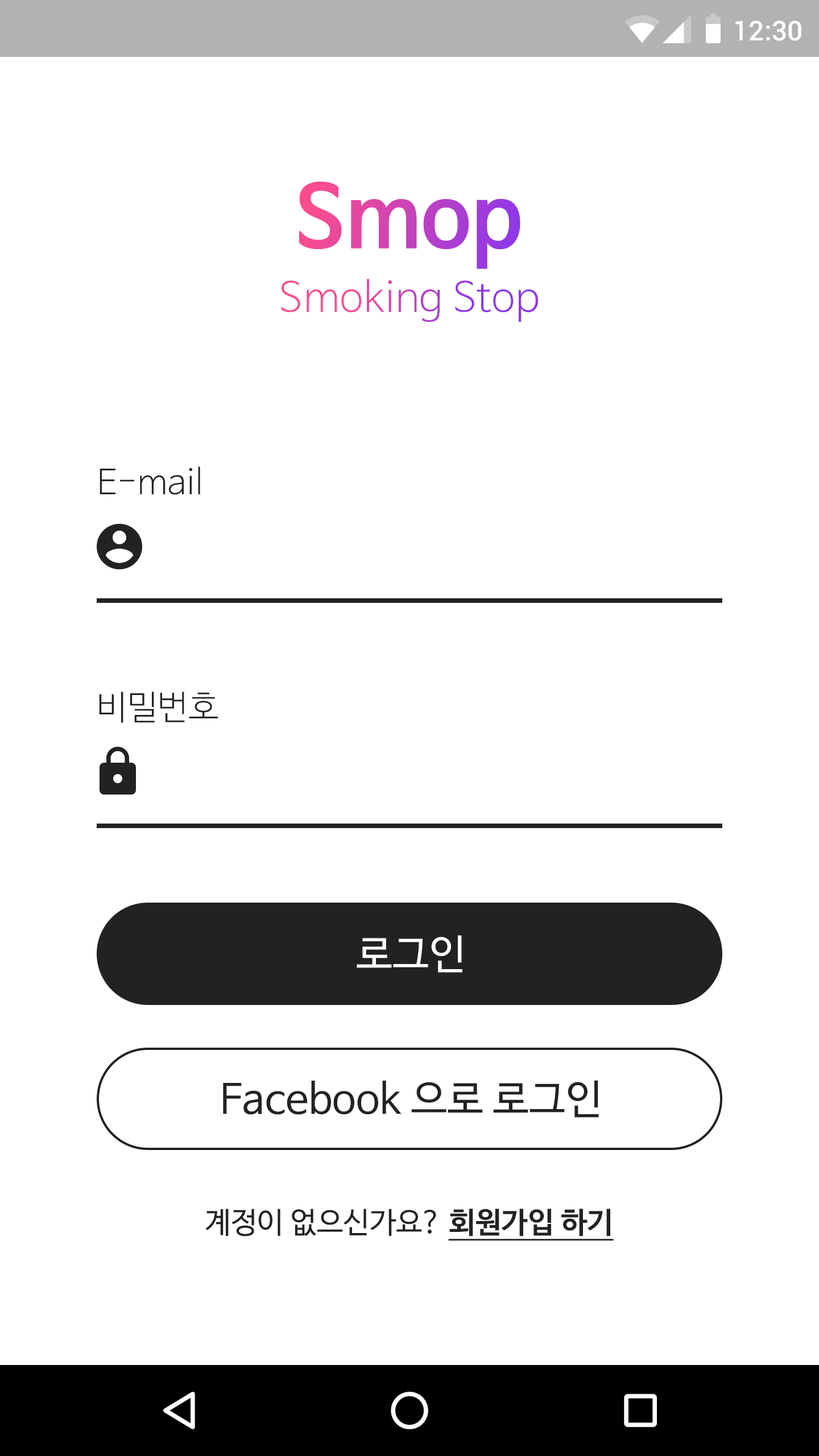
<style>
.page{position:relative;width:819px;height:1456px;background:#ffffff}
.page>*{position:absolute;margin:0}
.t1{font:27.3px "Roboto-Medium";color:#ffffff}
.t2{font:85.3px "NanumBarunGothicBold"}
.t3{font:40.9px "NanumBarunGothicLight"}
.t4{font:34.1px "NanumBarunGothicLight";color:#222222}
.t5{font:40.9px "NanumBarunGothic";color:#ffffff}
.t6{font:40.9px "NanumBarunGothic";color:#222222}
.t7{font:29.6px "NanumBarunGothic";color:#222222}
.t8{font:29.6px "NanumBarunGothicBold";color:#222222;text-decoration:underline}
</style>
<div class="page">
<p class="t1" style="left:735px;top:20px;width:66px;height:21px">12:30</p>
<p class="t2" style="left:299px;top:181px;width:221px;height:88px">Smop</p>
<p class="t3" style="left:281px;top:279px;width:257px;height:43px">Smoking Stop</p>
<p class="t4" style="left:100px;top:466px;width:100px;height:29px">E-mail</p>
<p class="t4" style="left:99px;top:692px;width:119px;height:31px">비밀번호</p>
<p class="t5" style="left:357px;top:935px;width:105px;height:38px">로그인</p>
<p class="t6" style="left:223px;top:1080px;width:376px;height:38px">Facebook 으로 로그인</p>
<p class="t7" style="left:205px;top:1209px;width:409px;height:32px">계정이 없으신가요? <span class="t8">회원가입 하기</span></p>
</div>
